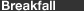
<style>
.page{position:relative;width:84px;height:11px;background:#333333}
.page>*{position:absolute;margin:0}
.t1{font:13px "HelveticaNeue-Bold";color:#ffffff}
</style>
<div class="page">
<p class="t1" style="left:2px;top:0px;width:53px;height:11px">Breakfall</p>
</div>
